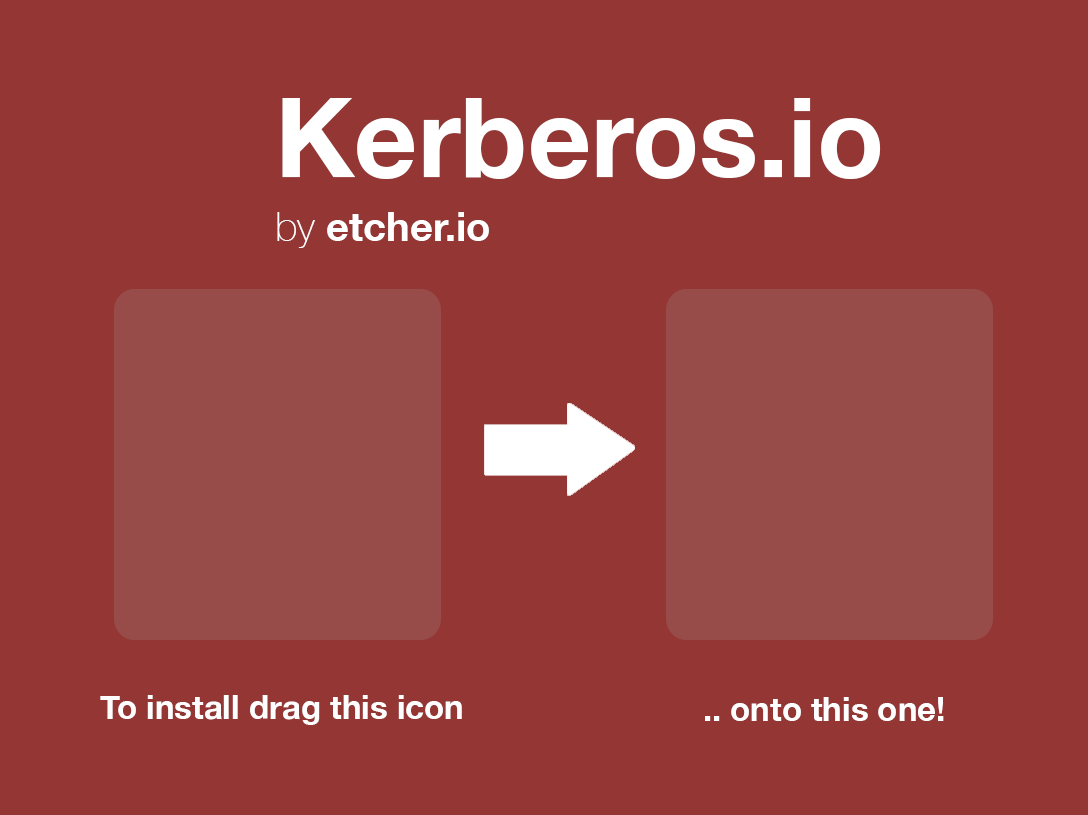
<style>
.page{position:relative;width:1088px;height:815px;background:#943633}
.page>*{position:absolute;margin:0}
.t1{font:110px/8px "HelveticaNeue-Bold";color:#ffffff}
.t2{font:40px/8px "HelveticaNeue-Thin";color:#ffffff}
.t3{font:40px/8px "HelveticaNeue-Bold";color:#ffffff}
.t4{font:33px "HelveticaNeue-Bold";color:#ffffff}
</style>
<div class="page">
<p class="t1" style="left:277px;top:98px;width:604px;height:150px">Kerberos.io<br><br><br><br><br><br><br><br><span class="t2">by</span><span class="t3"> etcher.io</span></p>
<p class="t4" style="left:100px;top:695px;width:362px;height:30px">To install drag this icon</p>
<p class="t4" style="left:705px;top:697px;width:239px;height:24px">.. onto this one!</p>
</div>
